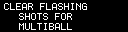
<style>
.page{position:relative;width:128px;height:32px;background:#000000}
.page>*{position:absolute;margin:0}
.t1{font:8px "Terminal";color:#ffffff}
</style>
<div class="page">
<p class="t1" style="left:4px;top:3px;width:83px;height:27px;text-align:center">CLEAR FLASHING<br>SHOTS FOR<br>MULTIBALL</p>
</div>
